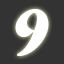
<style>
.page{position:relative;width:64px;height:64px;background:#333333}
.page>*{position:absolute;margin:0}
.t1{font:72px "ForteMT";color:#ffffff}
</style>
<div class="page">
<p class="t1" style="left:15px;top:9px;width:34px;height:47px">9</p>
</div>
